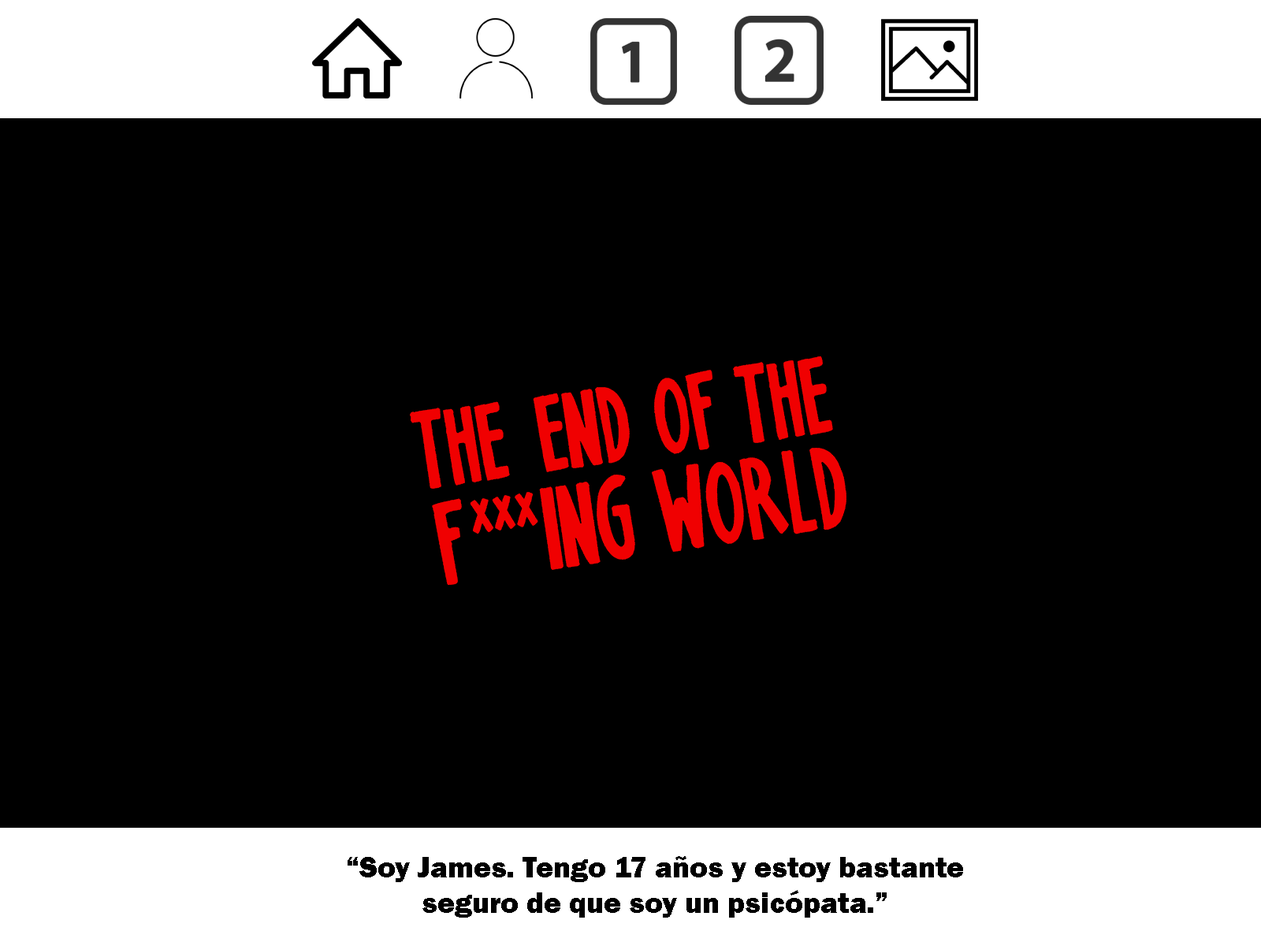
<style>
.page{position:relative;width:1261px;height:946px;background:#000000}
.page>*{position:absolute;margin:0}
.t1{font:29.6px "FranklinGothic-Heavy";color:#000000}
</style>
<div class="page">
<p class="t1" style="left:348px;top:856px;width:615px;height:61px;text-align:center">“Soy James. Tengo 17 años y estoy bastante seguro de que soy un psicópata.”</p>
</div>
